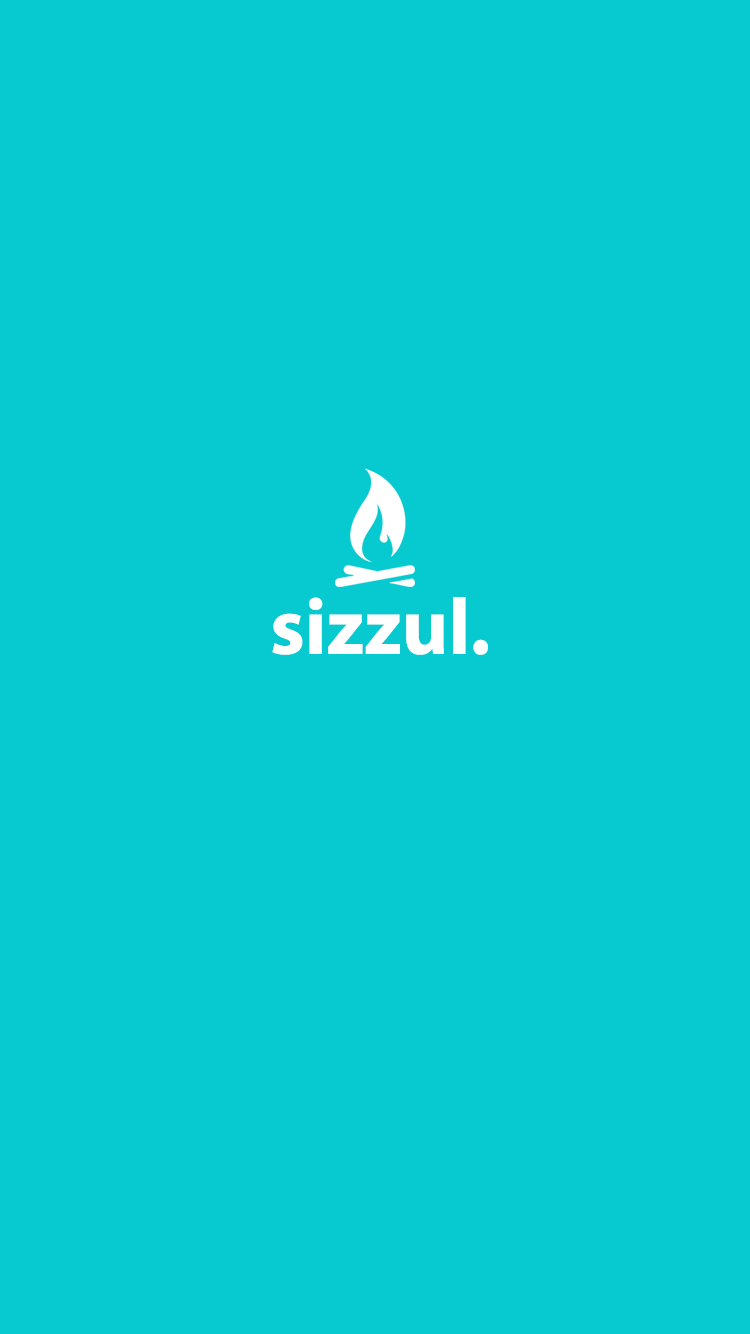
<style>
.page{position:relative;width:750px;height:1334px;background:#06cacf}
.page>*{position:absolute;margin:0}
.t1{font:80px "MyriadPro-Bold";color:#ffffff}
</style>
<div class="page">
<p class="t1" style="left:272px;top:597px;width:216px;height:58px">sizzul.</p>
</div>
